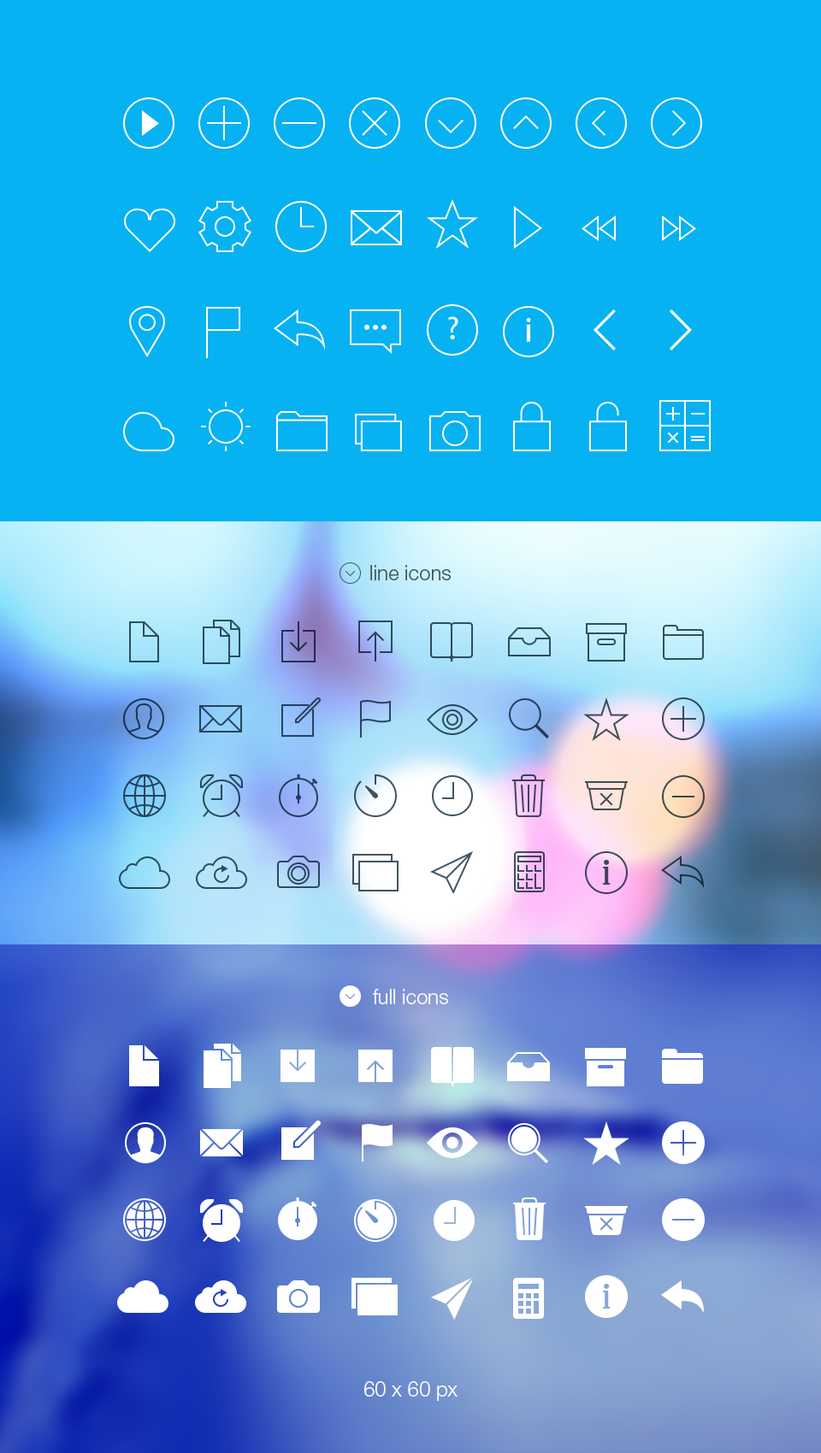
<style>
.page{position:relative;width:821px;height:1453px;background:#06b2f1}
.page>*{position:absolute;margin:0}
.t1{font:20.5px "HelveticaNeueLTStd-Lt";color:#415560}
.t2{font:20.5px "HelveticaNeueLTStd-Lt";color:#ffffff}
</style>
<div class="page">
<p class="t1" style="left:370px;top:565px;width:80px;height:15px">line icons</p>
<p class="t2" style="left:372px;top:989px;width:76px;height:15px">full icons</p>
<p class="t2" style="left:364px;top:1381px;width:93px;height:20px">60 x 60 px</p>
</div>
